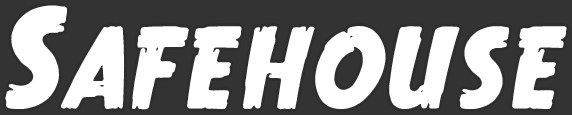
<style>
.page{position:relative;width:572px;height:115px;background:#333333}
.page>*{position:absolute;margin:0}
.t1{font:147.8px "TrueCrimes";color:#ffffff}
</style>
<div class="page">
<p class="t1" style="left:5px;top:5px;width:562px;height:105px">Safehouse</p>
</div>
